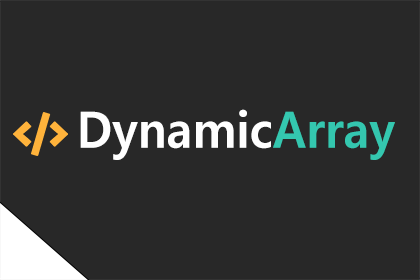
<style>
.page{position:relative;width:420px;height:280px;background:#282828}
.page>*{position:absolute;margin:0}
.t1{font:49.9px "MalgunGothicBold";color:#ffffff;scale:0.95 1}
.t2{font:49.9px "MalgunGothicBold";color:#34c7af;scale:0.95 1}
</style>
<div class="page">
<p class="t1" style="left:80px;top:109px;width:315px;height:51px">Dynamic<span class="t2">Array</span></p>
</div>
